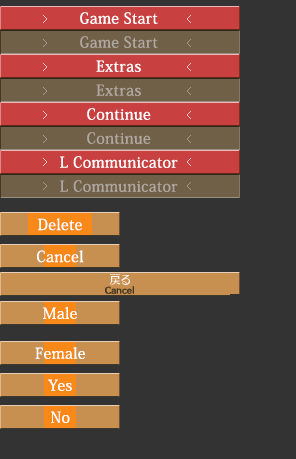
<style>
.page{position:relative;width:296px;height:459px;background:#333333}
.page>*{position:absolute;margin:0}
.t1{font:15px/24px "KozMinPro-Medium";letter-spacing:0.025em;color:#ffffff}
.t2{font:15px/24px "KozMinPro-Medium";letter-spacing:0.025em;color:#b0a8a0}
.t3{font:15px/32px "KozMinPro-Medium";letter-spacing:0.025em;color:#ffffff}
.t4{font:15px "KozMinPro-Medium";letter-spacing:0.025em;color:#ffffff}
</style>
<div class="page">
<p class="t1" style="left:60px;top:12px;width:118px;height:180px;text-align:center">Game Start<br><span class="t2">Game Start<br></span>Extras<br><span class="t2">Extras<br></span>Continue<br><span class="t2">Continue<br></span>L Communicator<br><span class="t2">L Communicator</span></p>
<p class="t3" style="left:37px;top:218px;width:47px;height:45px;text-align:center">Delete<br>Cancel</p>
<p class="t4" style="left:43px;top:307px;width:34px;height:12px">Male</p>
<p class="t3" style="left:35px;top:347px;width:50px;height:76px;text-align:center">Female<br>Yes<br>No</p>
</div>
